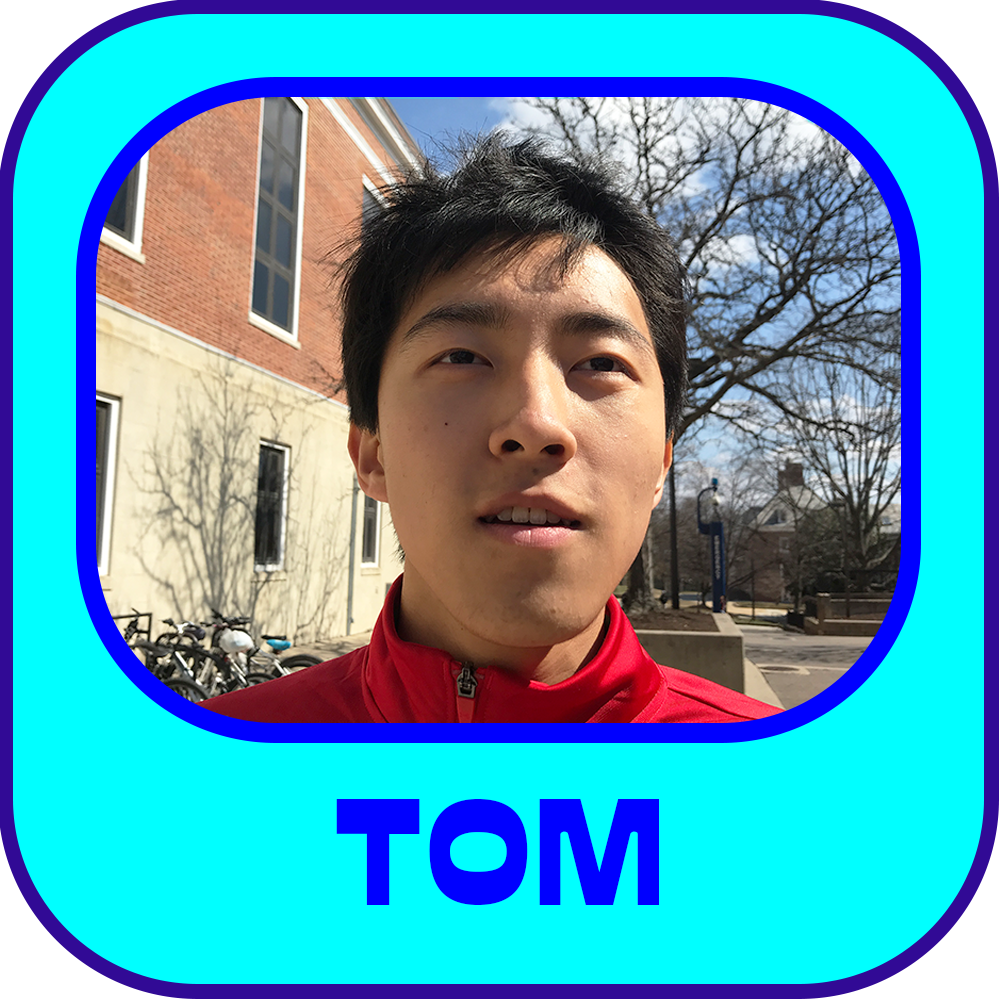
<style>
.page{position:relative;width:1000px;height:1000px;background:#00ffff}
.page>*{position:absolute;margin:0}
.t1{font:145.8px "Glockenspiel";color:#0000ff}
</style>
<div class="page">
<p class="t1" style="left:336px;top:799px;width:323px;height:106px">TOM</p>
</div>
